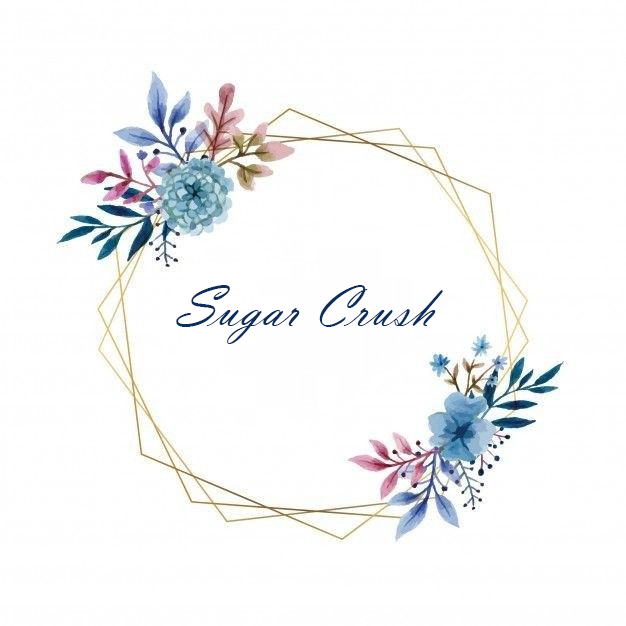
<style>
.page{position:relative;width:626px;height:626px;background:#ffffff}
.page>*{position:absolute;margin:0}
.t1{font:60px "VladimirScript";color:#0d2e5b}
</style>
<div class="page">
<p class="t1" style="left:176px;top:285px;width:267px;height:59px">Sugar Crush</p>
</div>
